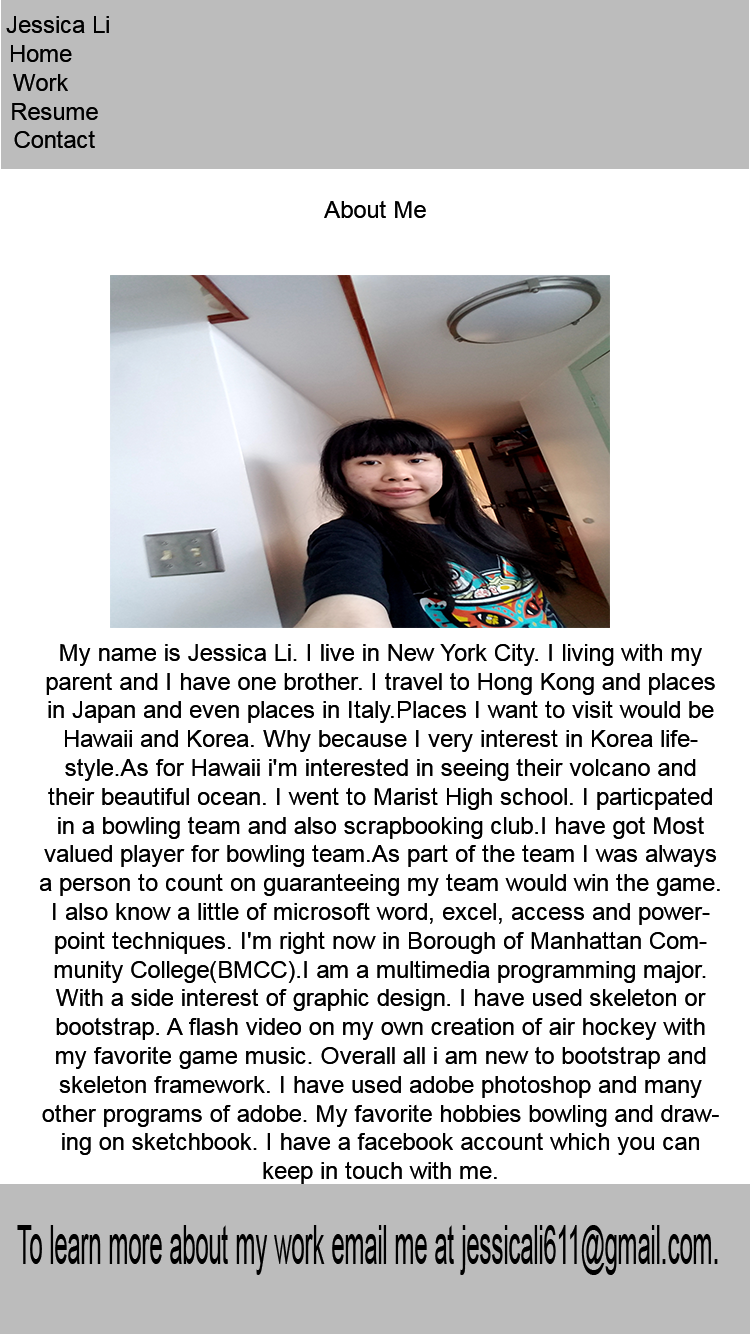
<style>
.page{position:relative;width:750px;height:1334px;background:#ffffff}
.page>*{position:absolute;margin:0}
.t1{font:24px "ArialMT";color:#000000}
.t2{font:54.5px "ArialMT";color:#000000;scale:0.44 1}
</style>
<div class="page">
<p class="t1" style="left:6px;top:16px;width:103px;height:132px;text-align:center">Jessica Li<br>Home<br>Work<br>    Resume<br>    Contact</p>
<p class="t1" style="left:324px;top:200px;width:102px;height:18px">About Me</p>
<p class="t1" style="left:40px;top:643px;width:680px;height:541px;text-align:center">My name is Jessica Li. I live in New York City. I living with my parent and I have one brother. I travel to Hong Kong and places in Japan and even places in Italy.Places I want to visit would be Hawaii and Korea. Why because I very interest in Korea lifestyle.As for Hawaii i'm interested in seeing their volcano and their beautiful ocean. I went to Marist High school. I particpated in a bowling team and also scrapbooking club.I have got Most valued player for bowling team.As part of the team I was always a person to count on guaranteeing my team would win the game. I also know a little of microsoft word, excel, access and powerpoint techniques. I'm right now in Borough of Manhattan Community College(BMCC).I am a multimedia programming major. With a side interest of graphic design. I have used skeleton or bootstrap. A flash video on my own creation of air hockey with my favorite game music. Overall all i am new to bootstrap and skeleton framework. I have used adobe photoshop and many other programs of adobe. My favorite hobbies bowling and drawing on sketchbook. I have a facebook account which you can keep in touch with me.</p>
<p class="t2" style="left:17px;top:1225px;width:701px;height:50px">To learn more about my work email me at jessicali611@gmail.com.</p>
</div>
